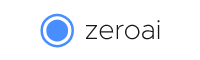
<style>
.page{position:relative;width:200px;height:60px;background:#ffffff}
.page>*{position:absolute;margin:0}
.t1{font:44px "DejaVuSans";color:#488eff}
.t2{font:27px "Metropolis-ExtraLight";color:#191616}
</style>
<div class="page">
<p class="t1" style="left:40px;top:13px;width:34px;height:35px">◉</p>
<p class="t2" style="left:85px;top:20px;width:75px;height:20px">zeroai</p>
</div>
